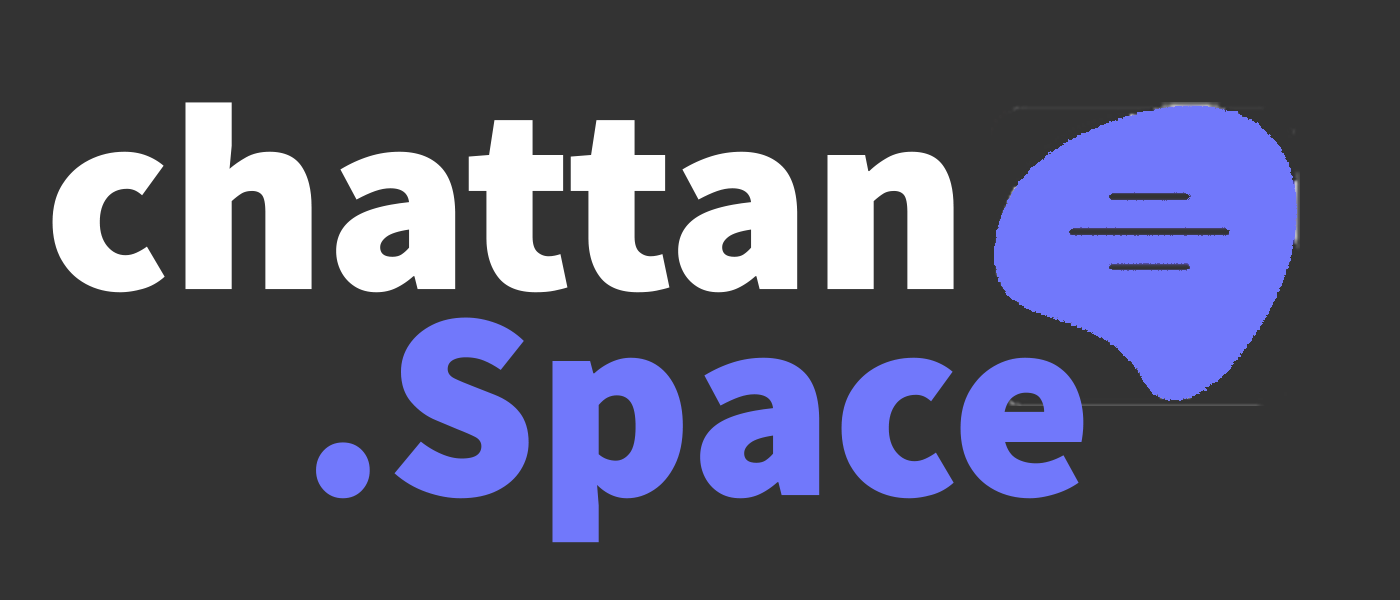
<style>
.page{position:relative;width:1400px;height:600px;background:#333333}
.page>*{position:absolute;margin:0}
.t1{font:268px "SourceSansPro-Black";color:#ffffff}
.t2{font:268px "SourceSansPro-Black";color:#7178fb}
</style>
<div class="page">
<p class="t1" style="left:52px;top:102px;width:902px;height:191px">chattan</p>
<p class="t2" style="left:316px;top:317px;width:768px;height:226px">.Space</p>
</div>
